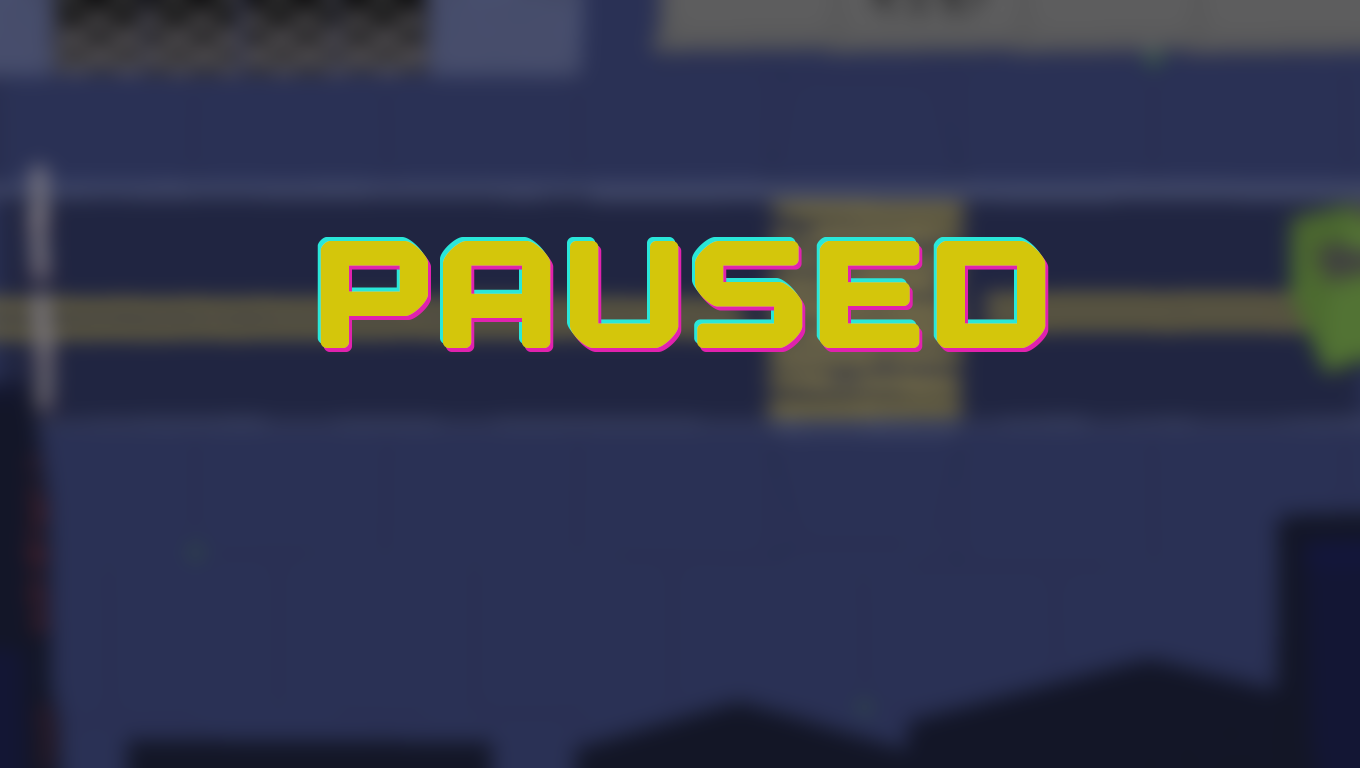
<style>
.page{position:relative;width:1360px;height:768px;background:#2a3155}
.page>*{position:absolute;margin:0}
.t1{font:168.1px "Kernel-Heavy";letter-spacing:-0.025em;color:#d4c60b}
</style>
<div class="page">
<p class="t1" style="left:320px;top:241px;width:726px;height:107px">PAUSED</p>
</div>
